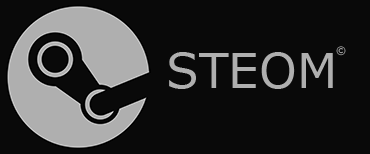
<style>
.page{position:relative;width:370px;height:154px;background:#090909}
.page>*{position:absolute;margin:0}
.t1{font:48px "Verdana";color:#afafaf}
.t2{font:10px "Verdana";color:#afafaf}
</style>
<div class="page">
<p class="t1" style="left:169px;top:52px;width:164px;height:37px">STEOM</p>
<p class="t2" style="left:336px;top:46px;width:10px;height:10px">©</p>
</div>
